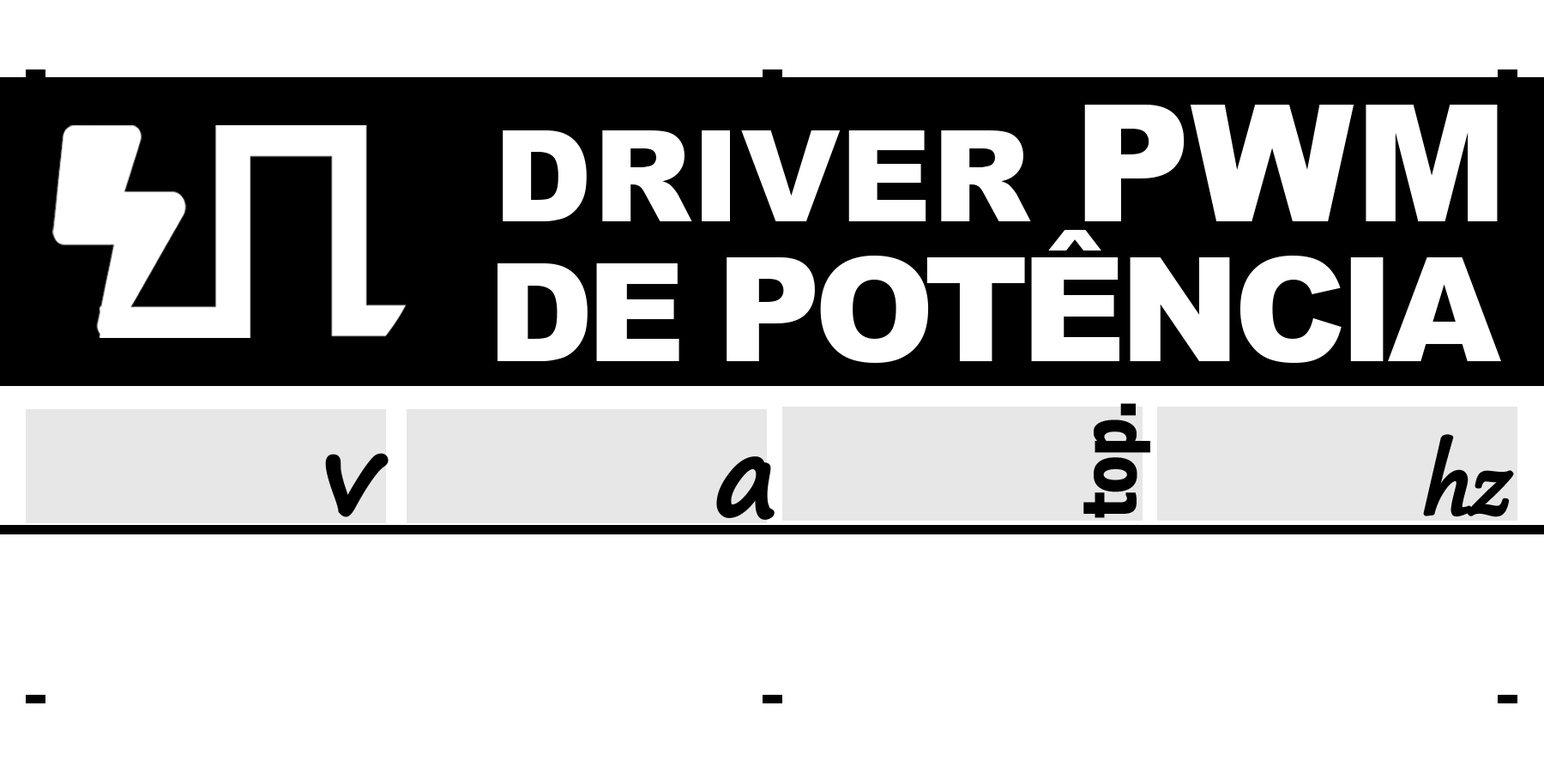
<style>
.page{position:relative;width:1544px;height:772px;background:#ffffff}
.page>*{position:absolute;margin:0}
.t1{font:127.1px "Arial-Black";color:#ffffff}
.t2{font:163.4px "Arial-Black";color:#ffffff}
.t3{font:145.3px "Arial-Black";letter-spacing:-0.05em;color:#ffffff}
.t4{font:163.4px "Arial-Black";letter-spacing:-0.05em;color:#ffffff}
.t5{font:136.2px "Arial-Black";letter-spacing:-0.05em;color:#ffffff}
.t6{font:72.6px "Tahoma-Bold";letter-spacing:-0.01em;color:#000000;font-weight:bold;scale:0.79 1}
.t7{font:114.6px "Gabriola";letter-spacing:-0.025em;color:#000000;font-weight:bold;font-style:italic}
.t8{font:109px "SegoePrint-Bold";letter-spacing:-0.01em;color:#000000;font-weight:bold}
</style>
<div class="page">
<p class="t1" style="left:503px;top:105px;width:995px;height:116px">DRIVER <span class="t2">PWM</span></p>
<p class="t3" style="left:498px;top:230px;width:1003px;height:133px"><span class="t4"><br></span><span class="t5">DE </span>POTÊNCIA</p>
<p class="t6" style="left:1084px;top:403px;width:67px;height:115px;rotate:-90deg">top.</p>
<p class="t7" style="left:1425px;top:436px;width:88px;height:80px">hz</p>
<p class="t8" style="left:325px;top:453px;width:64px;height:64px">v</p>
<p class="t8" style="left:716px;top:456px;width:59px;height:64px">a</p>
</div>
